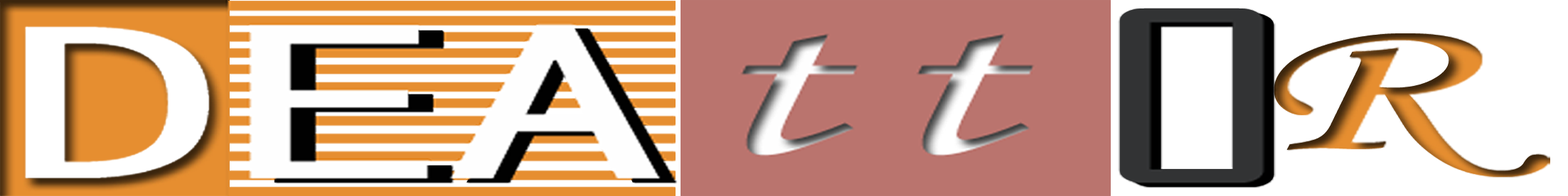
<style>
.page{position:relative;width:1568px;height:196px;background:#ffffff}
.page>*{position:absolute;margin:0}
.t1{font:227.3px "AgencyFB-Reg";color:#323334;scale:1.95 1}
.t2{font:227.3px "AgencyFB-Reg";scale:1.95 1}
.t3{font:227.3px "SimHei";color:#fefefe;scale:1.95 1}
.t4{font:227.3px "SimHei";scale:1.95 1}
.t5{font:227.3px "STLiti";scale:1.95 1}
.t6{font:194.8px "STLiti";scale:1.95 1}
</style>
<div class="page">
<p class="t1" style="left:1120px;top:8px;width:144px;height:175px">O</p>
<p class="t2" style="left:1131px;top:12px;width:143px;height:175px">O</p>
<p class="t3" style="left:250px;top:26px;width:177px;height:152px">E</p>
<p class="t4" style="left:274px;top:30px;width:178px;height:153px">E</p>
<p class="t3" style="left:450px;top:24px;width:208px;height:154px">A</p>
<p class="t4" style="left:466px;top:28px;width:209px;height:155px">A</p>
<p class="t5" style="left:741px;top:34px;width:115px;height:121px">t</p>
<p class="t5" style="left:917px;top:34px;width:116px;height:121px">t</p>
<p class="t6" style="left:1274px;top:33px;width:274px;height:144px">R</p>
</div>
